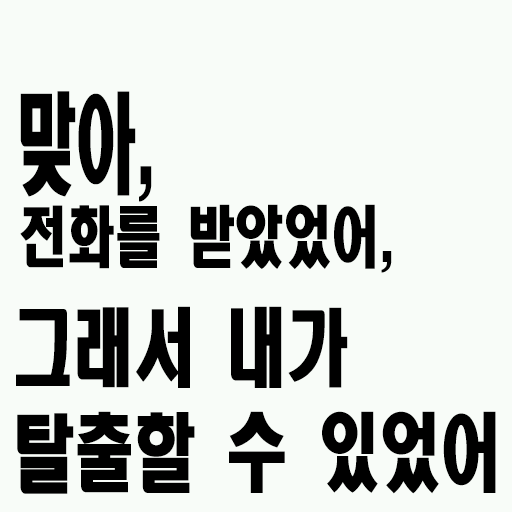
<style>
.page{position:relative;width:512px;height:512px;background:#f8fcf8}
.page>*{position:absolute;margin:0}
.t1{font:108px "HeadlineR-HM";color:#000000;scale:0.56 1}
.t2{font:66.6px "HeadlineR-HM";color:#000000;scale:0.72 1}
.t3{font:84.6px/105px "HeadlineR-HM";color:#000000;scale:0.72 1}
</style>
<div class="page">
<p class="t1" style="left:20px;top:91px;width:132px;height:111px">맞아,</p>
<p class="t2" style="left:20px;top:204px;width:372px;height:69px">전화를 받았었어,</p>
<p class="t3" style="left:16px;top:306px;width:480px;height:188px">그래서 내가<br>탈출할 수 있었어</p>
</div>
